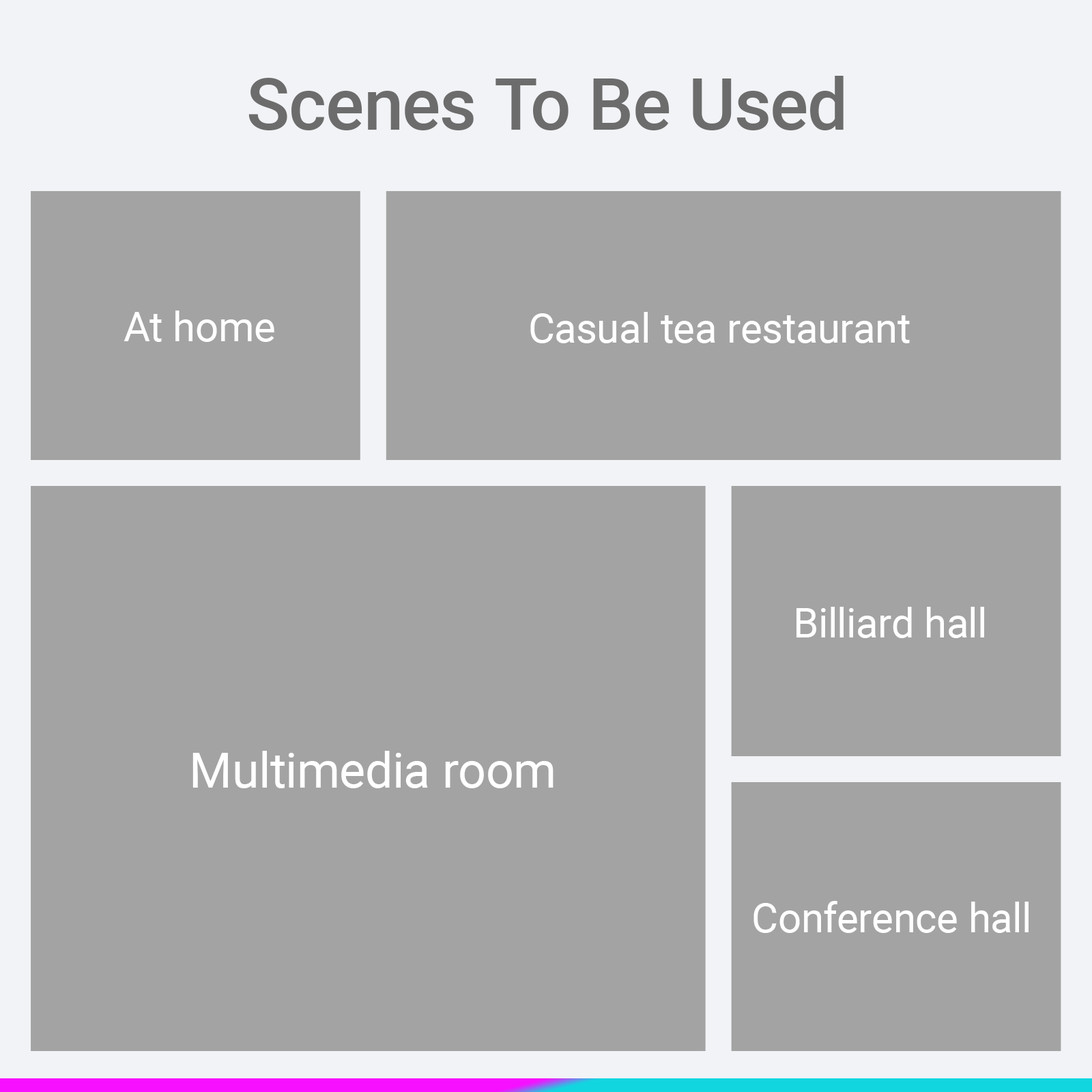
<style>
.page{position:relative;width:1092px;height:1092px;background:#a3a3a3}
.page>*{position:absolute;margin:0}
.t1{font:71.3px "Roboto-Medium";color:#6c6c6c}
.t2{font:40.9px "Roboto-Regular";color:#ffffff}
.t3{font:49.1px "Roboto-Regular";color:#ffffff}
</style>
<div class="page">
<p class="t1" style="left:248px;top:76px;width:596px;height:54px">Scenes To Be Used</p>
<p class="t2" style="left:124px;top:311px;width:150px;height:31px">At home</p>
<p class="t2" style="left:530px;top:312px;width:380px;height:31px">Casual tea restaurant</p>
<p class="t2" style="left:796px;top:607px;width:188px;height:31px">Billiard hall</p>
<p class="t3" style="left:192px;top:751px;width:362px;height:37px">Multimedia room</p>
<p class="t2" style="left:753px;top:901px;width:276px;height:32px">Conference hall</p>
</div>
